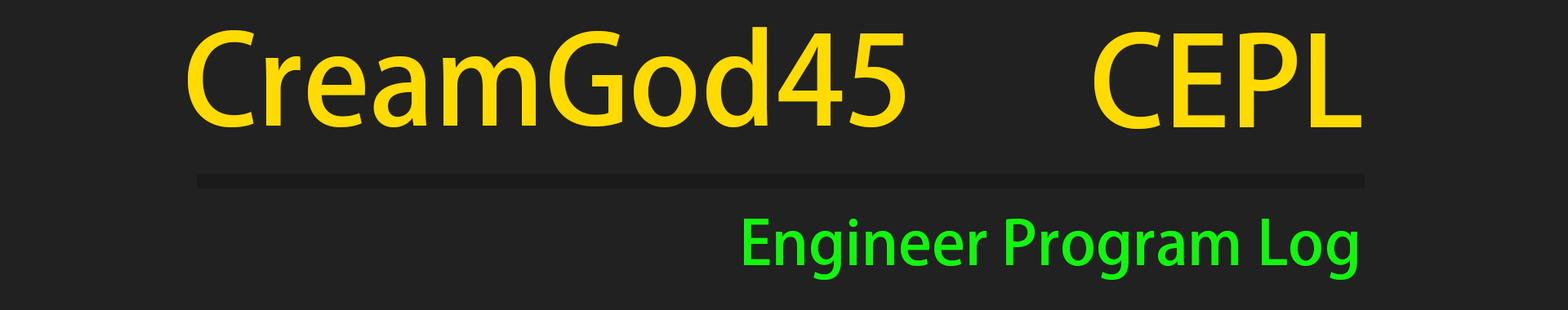
<style>
.page{position:relative;width:1568px;height:310px;background:#212121}
.page>*{position:absolute;margin:0}
.t1{font:122.5px "AdobeFanHeitiStd-Bold";color:#ffdb00}
.t2{font:61.2px "AdobeFanHeitiStd-Bold";color:#12f60f}
</style>
<div class="page">
<p class="t1" style="left:188px;top:27px;width:717px;height:100px">CreamGod45</p>
<p class="t1" style="left:1094px;top:32px;width:267px;height:97px">CEPL</p>
<p class="t2" style="left:744px;top:219px;width:613px;height:61px">Engineer Program Log</p>
</div>
